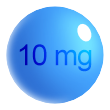
<style>
.page{position:relative;width:110px;height:110px;background:#ffffff}
.page>*{position:absolute;margin:0}
.t1{font:29.3px "ArialMT";letter-spacing:-0.04em}
</style>
<div class="page">
<p class="t1" style="left:19px;top:44px;width:73px;height:28px">10 mg</p>
</div>
